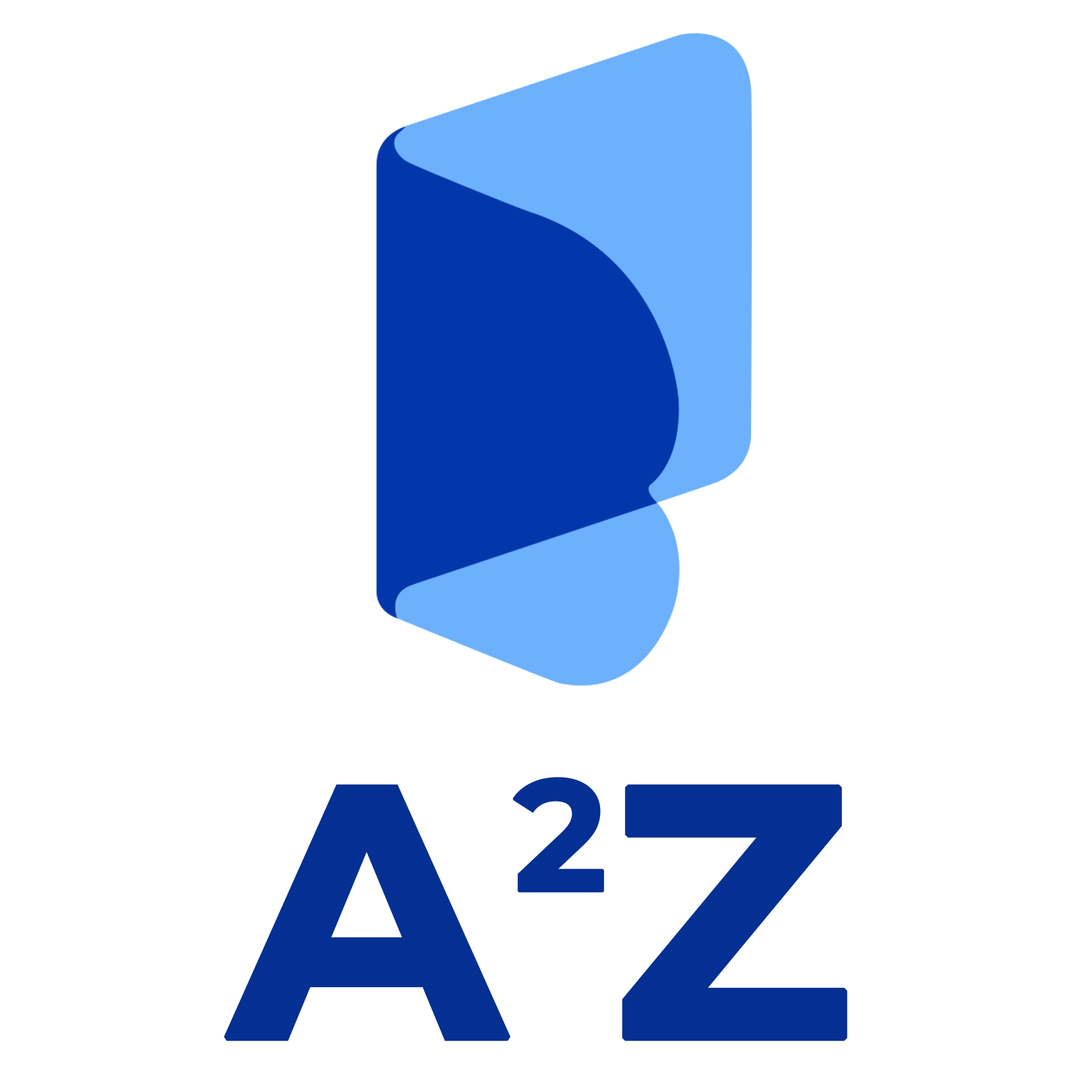
<style>
.page{position:relative;width:1092px;height:1092px;background:#ffffff}
.page>*{position:absolute;margin:0}
.t1{font:357.9px "Montserrat-Bold";color:#033092;text-transform:uppercase;font-weight:bold}
.t2{font:271.3px "Montserrat-Bold";color:#033092;text-transform:uppercase;font-weight:bold}
</style>
<div class="page">
<p class="t1" style="left:224px;top:777px;width:623px;height:264px">a<span class="t2">2</span>z</p>
</div>
